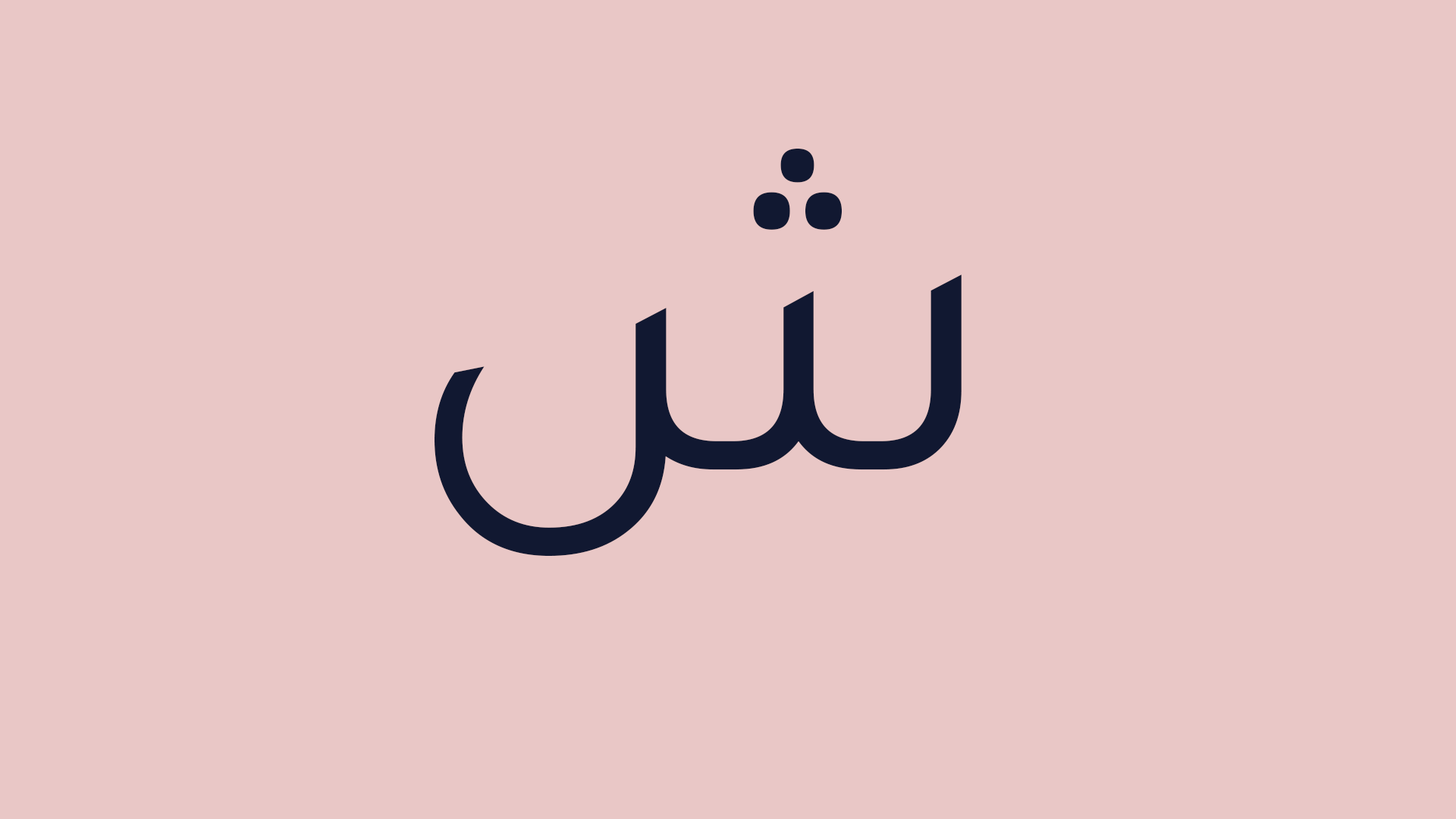
<style>
.page{position:relative;width:1456px;height:819px;background:#e9c7c6}
.page>*{position:absolute;margin:0}
.t1{font:455px "Tajawal-Regular";color:#111831}
</style>
<div class="page">
<p class="t1" style="left:435px;top:149px;width:527px;height:407px">ش</p>
</div>
